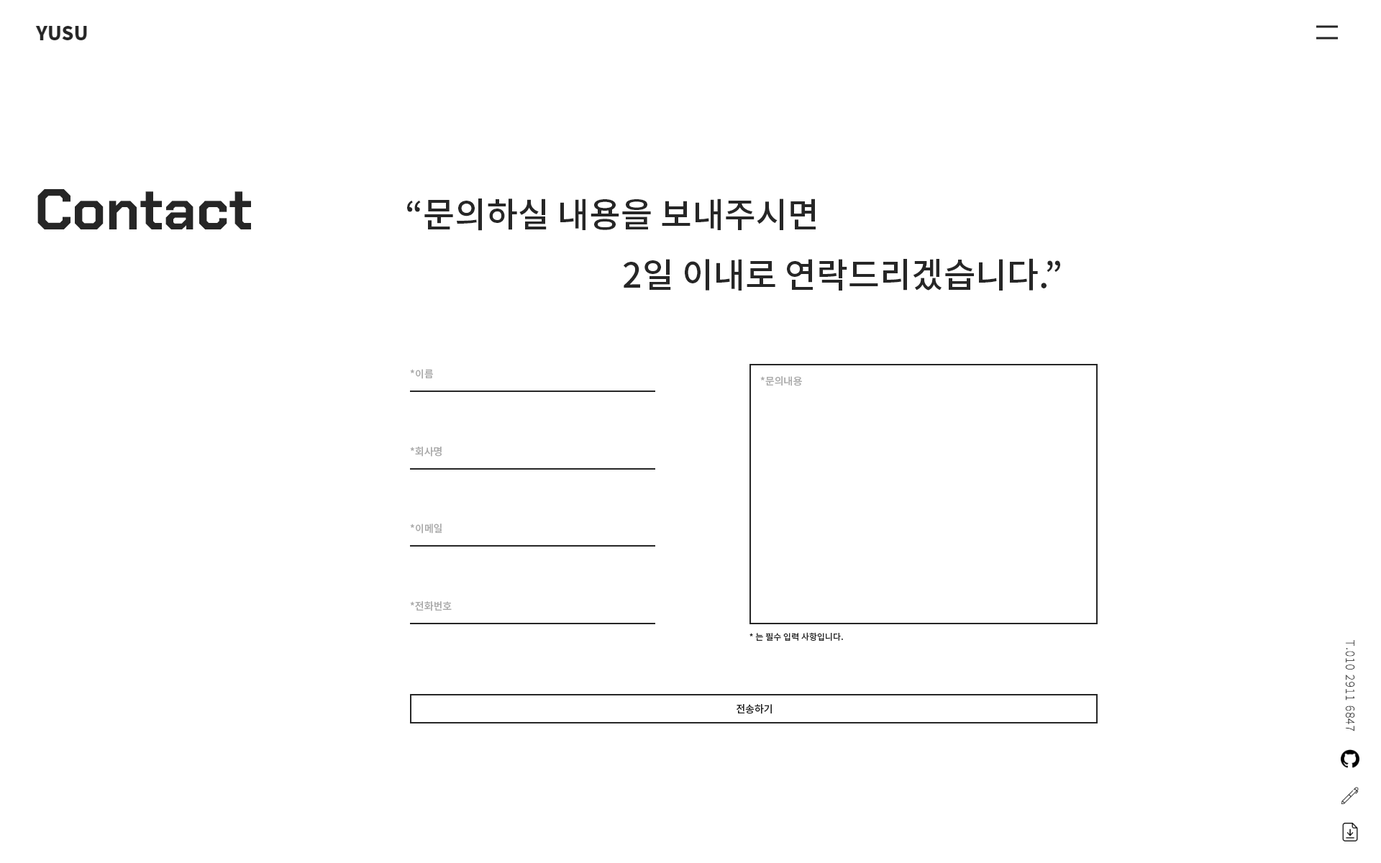
<style>
.page{position:relative;width:1381px;height:863px;background:#ffffff}
.page>*{position:absolute;margin:0}
.t1{font:57.6px "ChakraPetch-Bold";color:#262626}
.t2{font:34.5px "NotoSansKR-Medium";color:#262626}
.t3{font:10.1px "NotoSansKR-Medium";color:#aaaaaa}
.t4{font:8.6px "NotoSansKR-Medium";color:#262626}
.t5{font:10.1px "NotoSansKR-Medium";color:#262626}
</style>
<div class="page">
<p class="t1" style="left:37px;top:189px;width:214px;height:40px">Contact</p>
<p class="t2" style="left:407px;top:199px;width:653px;height:92px">“문의하실 내용을 보내주시면<br>                            2일 이내로 연락드리겠습니다.”</p>
<p class="t3" style="left:410px;top:369px;width:23px;height:10px">*이름</p>
<p class="t3" style="left:760px;top:376px;width:42px;height:10px">*문의내용</p>
<p class="t3" style="left:410px;top:447px;width:32px;height:10px">*회사명</p>
<p class="t3" style="left:410px;top:524px;width:32px;height:10px">*이메일</p>
<p class="t3" style="left:410px;top:601px;width:42px;height:10px">*전화번호</p>
<p class="t4" style="left:750px;top:632px;width:93px;height:10px">* 는 필수 입력 사항입니다.</p>
<p class="t5" style="left:737px;top:704px;width:35px;height:10px">전송하기</p>
</div>
